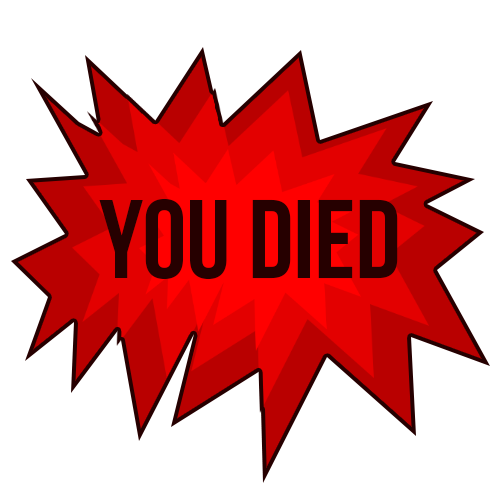
<style>
.page{position:relative;width:500px;height:500px;background:#ffffff}
.page>*{position:absolute;margin:0}
.t1{font:111.6px "BebasNeueBold";color:#260000}
</style>
<div class="page">
<p class="t1" style="left:99px;top:198px;width:299px;height:82px">you died</p>
</div>
